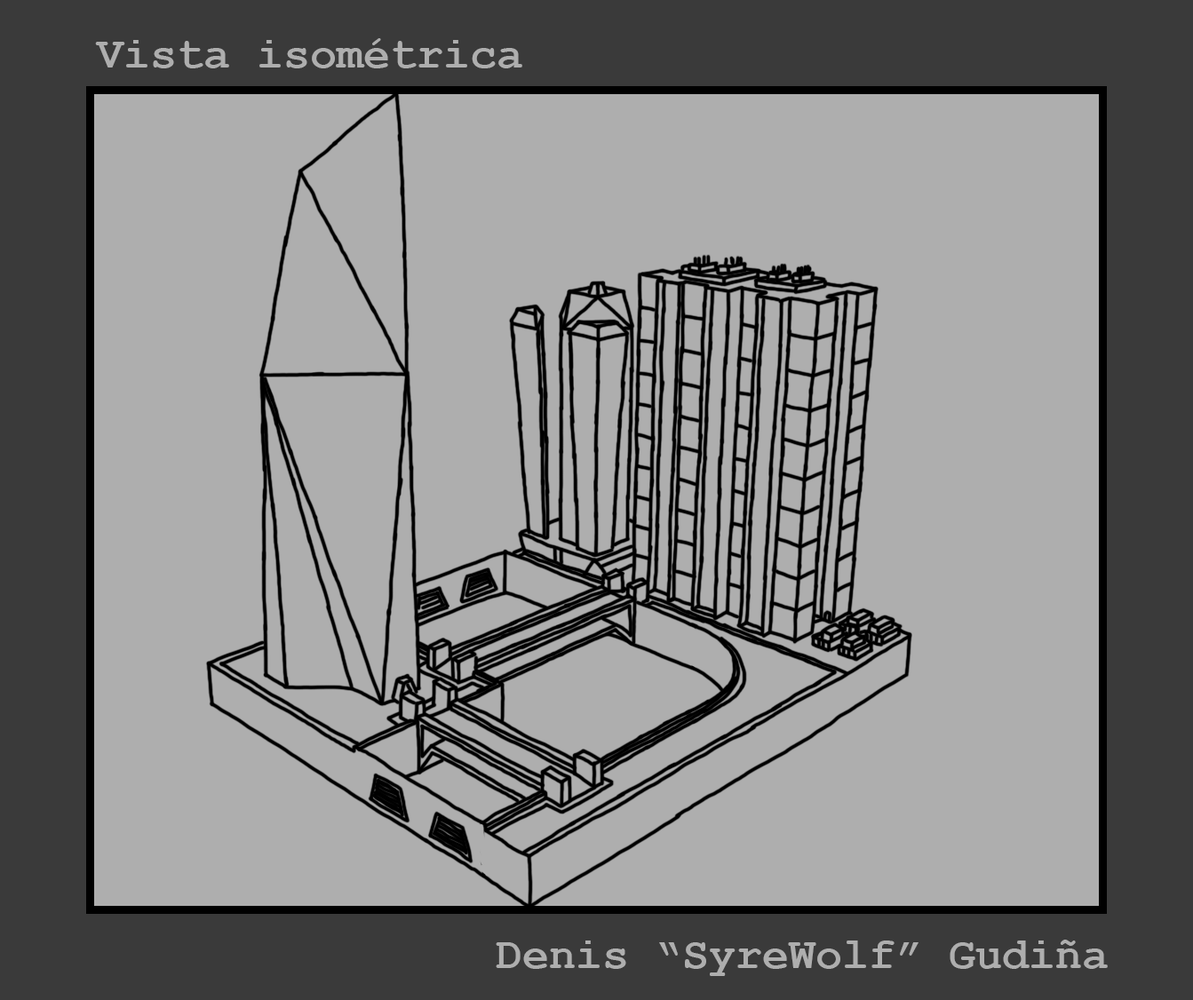
<style>
.page{position:relative;width:1193px;height:1000px;background:#aeaeae}
.page>*{position:absolute;margin:0}
.t1{font:44.4px "CourierNewPS-BoldMT";color:#aeaeae}
</style>
<div class="page">
<p class="t1" style="left:95px;top:38px;width:427px;height:30px">Vista isométrica</p>
<p class="t1" style="left:496px;top:939px;width:611px;height:37px">Denis “SyreWolf” Gudiña</p>
</div>
